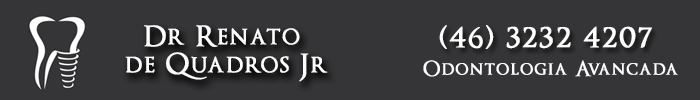
<style>
.page{position:relative;width:700px;height:100px;background:#353537}
.page>*{position:absolute;margin:0}
.t1{font:27.7px/27.7px "OptimusPrinceps";letter-spacing:0.05em;color:#fefdfd;font-weight:bold}
.t2{font:33.2px "OptimusPrinceps";letter-spacing:0.05em;color:#fefdfd;font-weight:bold}
.t3{font:20.6px "OptimusPrinceps";letter-spacing:0.05em;color:#fefdfd;font-weight:bold}
</style>
<div class="page">
<p class="t1" style="left:125px;top:25px;width:203px;height:57px;text-align:center">Dr Renato <br>de Quadros Jr</p>
<p class="t2" style="left:439px;top:25px;width:213px;height:24px">(46) 3232 4207</p>
<p class="t3" style="left:423px;top:60px;width:255px;height:17px">Odontologia Avancada</p>
</div>
